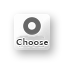
<style>
.page{position:relative;width:64px;height:64px;background:#ffffff}
.page>*{position:absolute;margin:0}
.t1{font:9px "AmiraParadiso";letter-spacing:0.05em;color:#424242}
</style>
<div class="page">
<p class="t1" style="left:16px;top:38px;width:33px;height:7px">Choose</p>
</div>
